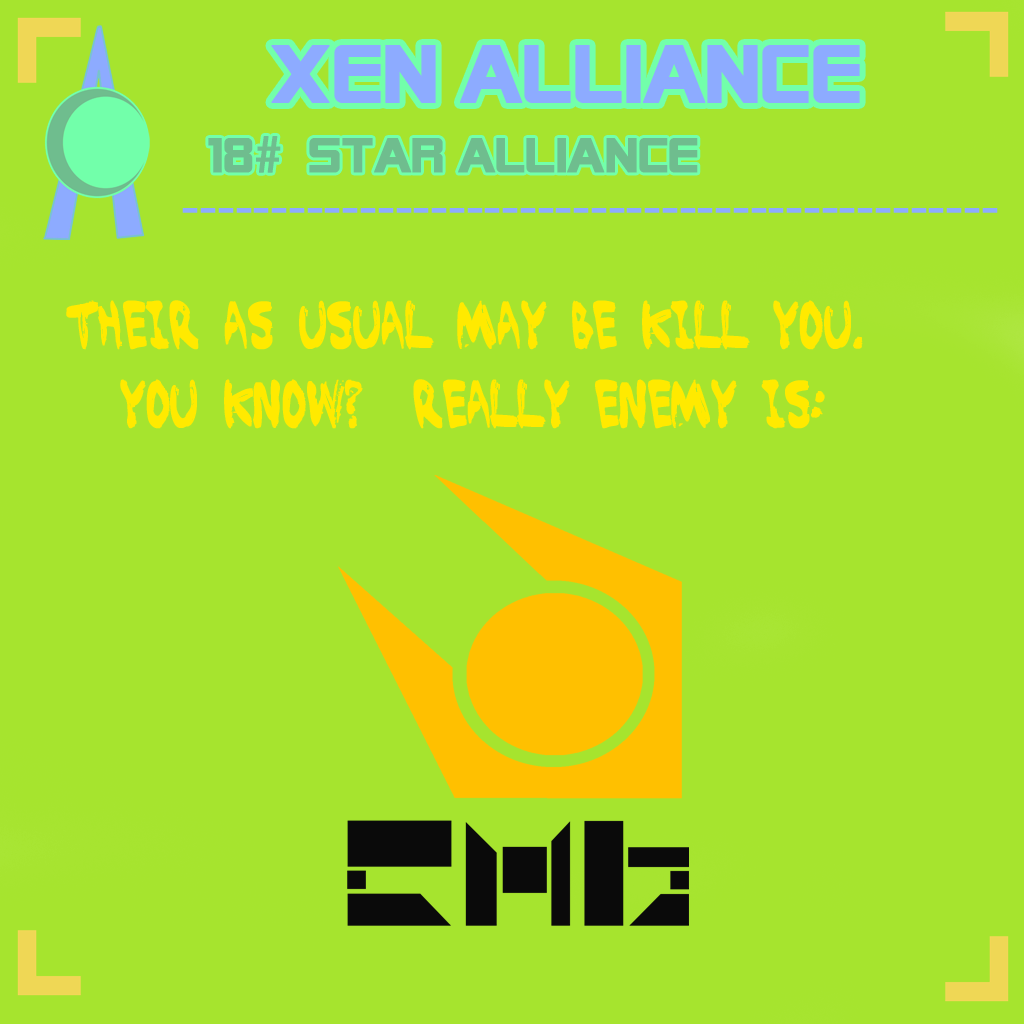
<style>
.page{position:relative;width:1024px;height:1024px;background:#a6e42e}
.page>*{position:absolute;margin:0}
.t1{font:80px "AlienEncountersSolid";color:#8dabff;font-weight:bold}
.t2{font:48px "AlienEncountersSolid";color:#6fbd8e;font-weight:bold}
.t3{font:48px "AdobeHeitiStd-Regular";color:#6fbd8e;font-weight:bold}
.t4{font:48px "AdobeHeitiStd-Regular";color:#8dabff;font-weight:bold}
.t5{font:48px "Brushed";color:#ffea00;font-weight:bold}
</style>
<div class="page">
<p class="t1" style="left:271px;top:45px;width:589px;height:58px">XEN alliance</p>
<p class="t2" style="left:208px;top:136px;width:490px;height:37px">18<span class="t3">#</span>  Star Alliance</p>
<p class="t4" style="left:182px;top:208px;width:816px;height:5px">----------------------------------------------</p>
<p class="t5" style="left:66px;top:300px;width:797px;height:50px">Their as usual may be kill you.</p>
<p class="t5" style="left:120px;top:379px;width:705px;height:50px">you know?  really enemy is:</p>
</div>
